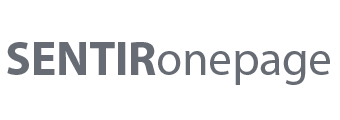
<style>
.page{position:relative;width:340px;height:120px;background:#ffffff}
.page>*{position:absolute;margin:0}
.t1{font:48.2px "MyriadPro-Regular";letter-spacing:-0.01em;color:#676b74}
.t2{font:48.2px "MyriadPro-Bold";letter-spacing:-0.01em;color:#676b74}
</style>
<div class="page">
<p class="t1" style="left:7px;top:42px;width:323px;height:43px"><span class="t2">SENTIR</span>onepage</p>
</div>
